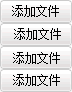
<style>
.page{position:relative;width:72px;height:92px}
.page>*{position:absolute;margin:0}
.t1{font:12px "SimSun";color:#000000}
</style>
<div class="page">
<p class="t1" style="left:12px;top:5px;width:47px;height:12px">添加文件</p>
<p class="t1" style="left:14px;top:28px;width:47px;height:12px">添加文件</p>
<p class="t1" style="left:13px;top:52px;width:47px;height:12px">添加文件</p>
<p class="t1" style="left:13px;top:74px;width:47px;height:12px">添加文件</p>
</div>
